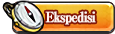
<style>
.page{position:relative;width:115px;height:34px}
.page>*{position:absolute;margin:0}
.t1{font:14px "RyuminPro-ExBold";letter-spacing:-0.08em;color:#fff4ee;font-weight:bold;scale:0.9 1}
</style>
<div class="page">
<p class="t1" style="left:45px;top:11px;width:51px;height:14px">Ekspedisi</p>
</div>
